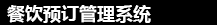
<style>
.page{position:relative;width:217px;height:25px;background:#000000}
.page>*{position:absolute;margin:0}
.t1{font:18px "MicrosoftYaHei-Bold";color:#ffffff}
</style>
<div class="page">
<p class="t1" style="left:7px;top:5px;width:144px;height:18px">餐饮预订管理系统</p>
</div>
